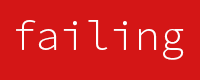
<style>
.page{position:relative;width:200px;height:80px;background:#d41616}
.page>*{position:absolute;margin:0}
.t1{font:41.7px "SourceCodePro-Light";color:#ffffff}
</style>
<div class="page">
<p class="t1" style="left:16px;top:20px;width:168px;height:40px">failing</p>
</div>
